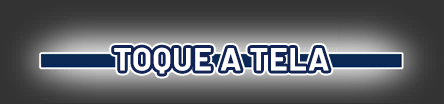
<style>
.page{position:relative;width:444px;height:104px}
.page>*{position:absolute;margin:0}
.t1{font:32px "Barlow-Bold";letter-spacing:0.025em;color:#ffffff}
</style>
<div class="page">
<p class="t1" style="left:114px;top:47px;width:215px;height:27px">TOQUE A TELA</p>
</div>
